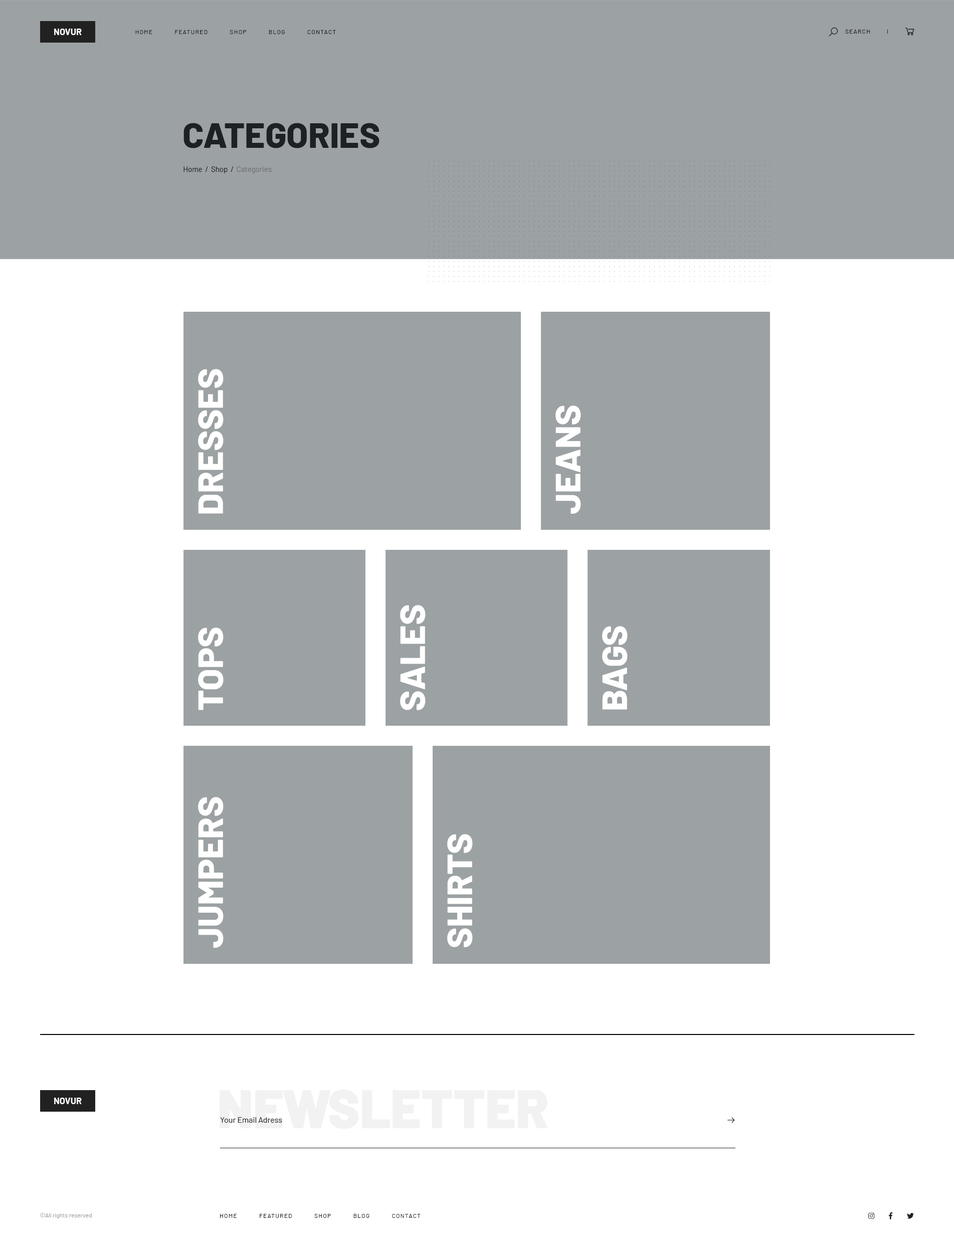
<style>
.page{position:relative;width:954px;height:1250px;background:#ffffff}
.page>*{position:absolute;margin:0}
.t1{font:9px "Barlow-Bold";color:#fefefe;text-transform:uppercase}
.t2{font:6px "Barlow-Regular";letter-spacing:0.1em;color:#1e2124;text-transform:uppercase}
.t3{font:35.1px "Barlow-ExtraBold";color:#1e2124;text-transform:uppercase}
.t4{font:7.5px "Barlow-Regular";color:#1e2124}
.t5{font:7.5px "Barlow-Regular";color:#6e7071}
.t6{font:35.1px "Barlow-ExtraBold";color:#ffffff;text-transform:uppercase}
.t7{font:53.6px "Barlow-Black";color:#f2f2f2}
.t8{font:8px "Barlow-Regular";color:#1e2124}
.t9{font:6px "Barlow-Regular";color:#9e9d9d}
</style>
<div class="page">
<p class="t1" style="left:54px;top:29px;width:28px;height:6px">novur</p>
<p class="t2" style="left:845px;top:30px;width:25px;height:4px">Search</p>
<p class="t2" style="left:135px;top:30px;width:201px;height:4px">Home            Featured            Shop            Blog            Contact</p>
<p class="t3" style="left:183px;top:123px;width:196px;height:25px">Categories</p>
<p class="t4" style="left:183px;top:166px;width:89px;height:7px">Home  /  Shop  /  <span class="t5">Categories</span></p>
<p class="t6" style="left:198px;top:369px;width:26px;height:145px;rotate:-90deg">Dresses</p>
<p class="t6" style="left:555px;top:406px;width:26px;height:108px;rotate:-90deg">JEANS</p>
<p class="t6" style="left:400px;top:605px;width:26px;height:105px;rotate:-90deg">Sales</p>
<p class="t6" style="left:198px;top:628px;width:26px;height:82px;rotate:-90deg">Tops</p>
<p class="t6" style="left:602px;top:626px;width:26px;height:84px;rotate:-90deg">Bags</p>
<p class="t6" style="left:198px;top:797px;width:26px;height:151px;rotate:-90deg">Jumpers</p>
<p class="t6" style="left:447px;top:834px;width:26px;height:113px;rotate:-90deg">Shirts</p>
<p class="t1" style="left:54px;top:1098px;width:28px;height:6px">Novur</p>
<p class="t7" style="left:220px;top:1090px;width:327px;height:39px">NEWSLETTER</p>
<p class="t8" style="left:220px;top:1117px;width:62px;height:6px">Your Email Adress</p>
<p class="t9" style="left:40px;top:1213px;width:52px;height:6px">©All rights reserved</p>
<p class="t2" style="left:220px;top:1214px;width:201px;height:4px">Home            Featured            Shop            Blog            Contact</p>
</div>
